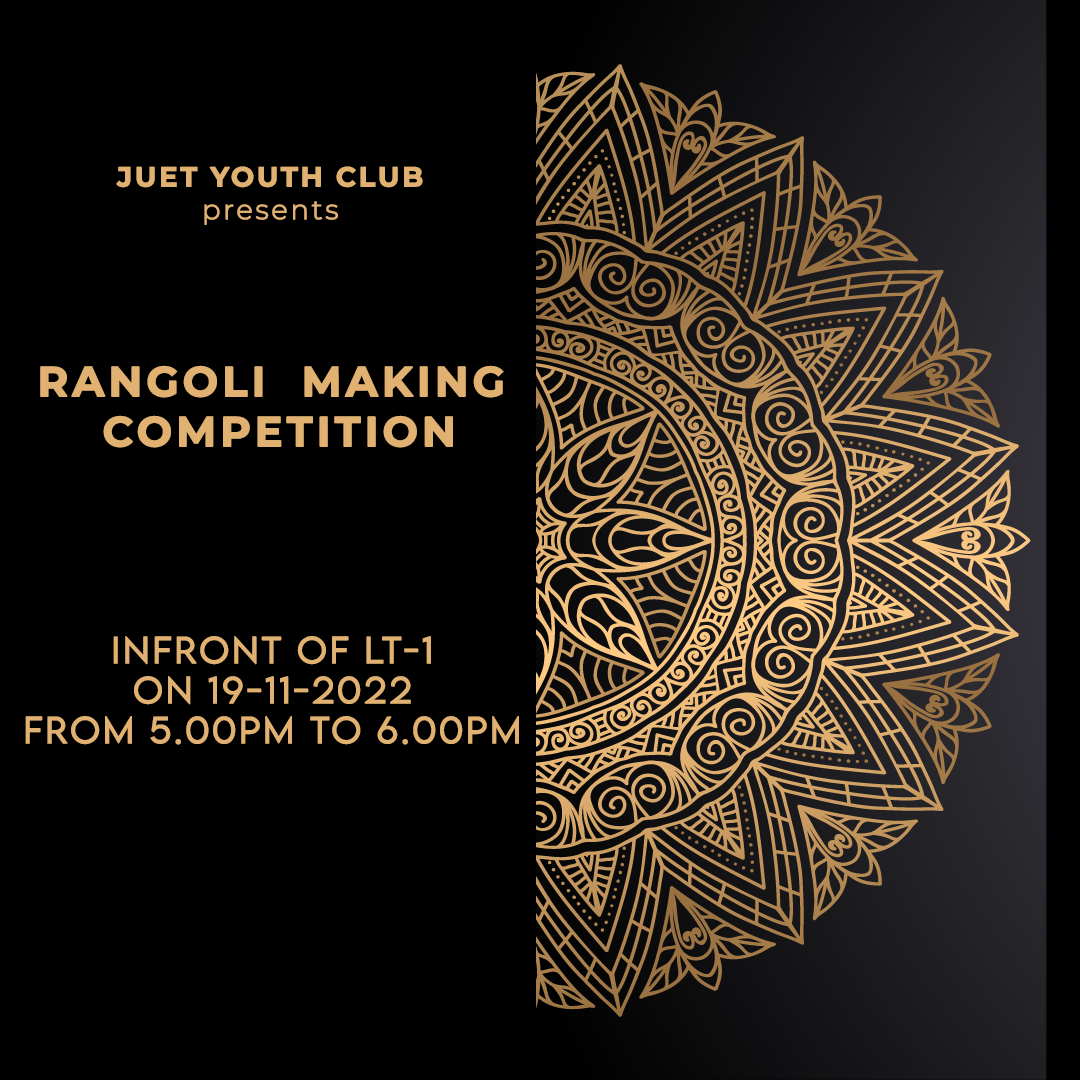
<style>
.page{position:relative;width:1080px;height:1080px;background:#000000}
.page>*{position:absolute;margin:0}
.t1{font:27.3px "Montserrat-Bold";letter-spacing:0.075em;color:#e1b171;font-weight:bold}
.t2{font:27.3px "Montserrat-Light";letter-spacing:0.075em;color:#e1b171;font-weight:bold}
.t3{font:41.7px "Montserrat-Bold";letter-spacing:0.075em;color:#e1b171;font-weight:bold}
.t4{font:33.3px "LEMONMILK-Light";letter-spacing:0.075em;color:#e1b171;font-weight:bold}
</style>
<div class="page">
<p class="t1" style="left:116px;top:166px;width:307px;height:59px;text-align:center">JUET YOUTH CLUB<br><span class="t2">presents</span></p>
<p class="t3" style="left:40px;top:365px;width:464px;height:83px">RANGOLI  MAKING<br>COMPETITION</p>
<p class="t4" style="left:25px;top:636px;width:494px;height:109px;text-align:center">Infront of LT-1<br>On 19-11-2022<br>From 5.00PM to 6.00PM</p>
</div>
